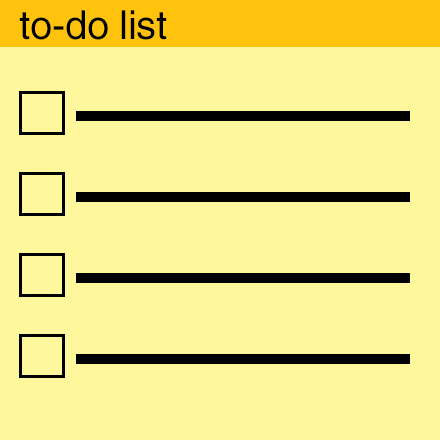
<style>
.page{position:relative;width:440px;height:440px;background:#fef79c}
.page>*{position:absolute;margin:0}
.t1{font:40px "Helvetica";letter-spacing:-0.01em;color:#000000}
</style>
<div class="page">
<p class="t1" style="left:19px;top:10px;width:148px;height:30px">to-do list</p>
</div>
